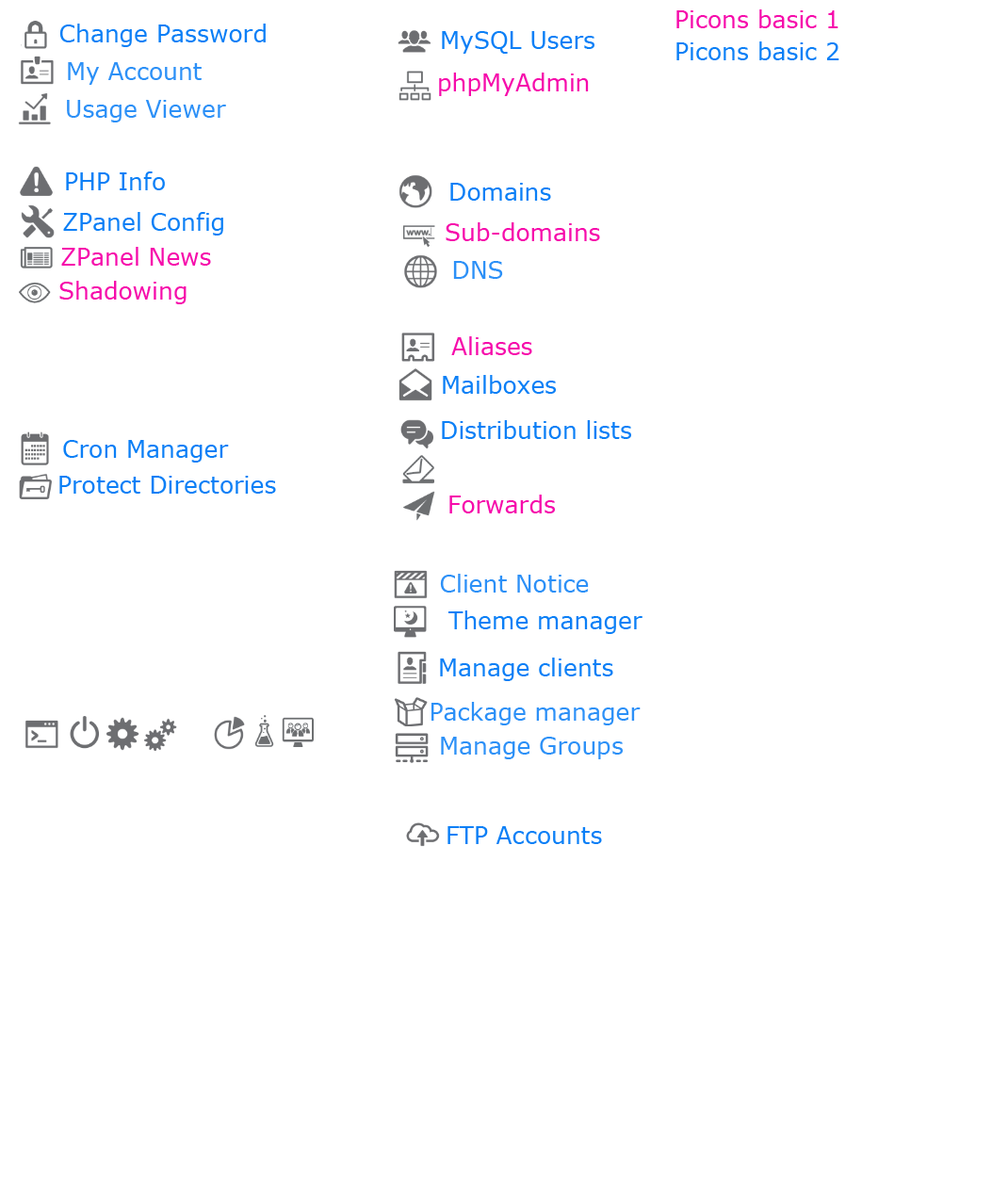
<style>
.page{position:relative;width:992px;height:1203px;background:#ffffff}
.page>*{position:absolute;margin:0}
.t1{font:23.5px "Verdana";color:#f60bab}
.t2{font:23.5px "Verdana";color:#0b7ff6}
.t3{font:23.5px "Verdana";color:#2c90f7}
</style>
<div class="page">
<p class="t1" style="left:676px;top:9px;width:162px;height:19px">Picons basic 1</p>
<p class="t2" style="left:59px;top:24px;width:207px;height:23px">Change Password</p>
<p class="t2" style="left:442px;top:31px;width:152px;height:23px">MySQL Users</p>
<p class="t2" style="left:676px;top:41px;width:163px;height:19px">Picons basic 2</p>
<p class="t3" style="left:68px;top:62px;width:134px;height:23px">My Account</p>
<p class="t1" style="left:439px;top:73px;width:150px;height:23px">phpMyAdmin</p>
<p class="t3" style="left:67px;top:100px;width:159px;height:22px">Usage Viewer</p>
<p class="t2" style="left:66px;top:171px;width:99px;height:19px">PHP Info</p>
<p class="t2" style="left:450px;top:183px;width:101px;height:18px">Domains</p>
<p class="t2" style="left:63px;top:212px;width:160px;height:23px">ZPanel Config</p>
<p class="t1" style="left:445px;top:222px;width:155px;height:19px">Sub-domains</p>
<p class="t1" style="left:61px;top:247px;width:150px;height:19px">ZPanel News</p>
<p class="t3" style="left:453px;top:261px;width:50px;height:18px">DNS</p>
<p class="t1" style="left:59px;top:281px;width:127px;height:23px">Shadowing</p>
<p class="t1" style="left:451px;top:336px;width:81px;height:19px">Aliases</p>
<p class="t2" style="left:443px;top:375px;width:113px;height:19px">Mailboxes</p>
<p class="t2" style="left:442px;top:420px;width:189px;height:19px">Distribution lists</p>
<p class="t2" style="left:63px;top:440px;width:166px;height:22px">Cron Manager</p>
<p class="t2" style="left:59px;top:476px;width:217px;height:17px">Protect Directories</p>
<p class="t1" style="left:449px;top:494px;width:106px;height:19px">Forwards</p>
<p class="t3" style="left:440px;top:573px;width:149px;height:19px">Client Notice</p>
<p class="t2" style="left:448px;top:610px;width:194px;height:24px">Theme manager</p>
<p class="t2" style="left:440px;top:657px;width:173px;height:24px">Manage clients</p>
<p class="t3" style="left:430px;top:702px;width:210px;height:23px">Package manager</p>
<p class="t3" style="left:441px;top:736px;width:181px;height:23px">Manage Groups</p>
<p class="t2" style="left:447px;top:826px;width:155px;height:18px">FTP Accounts</p>
</div>
